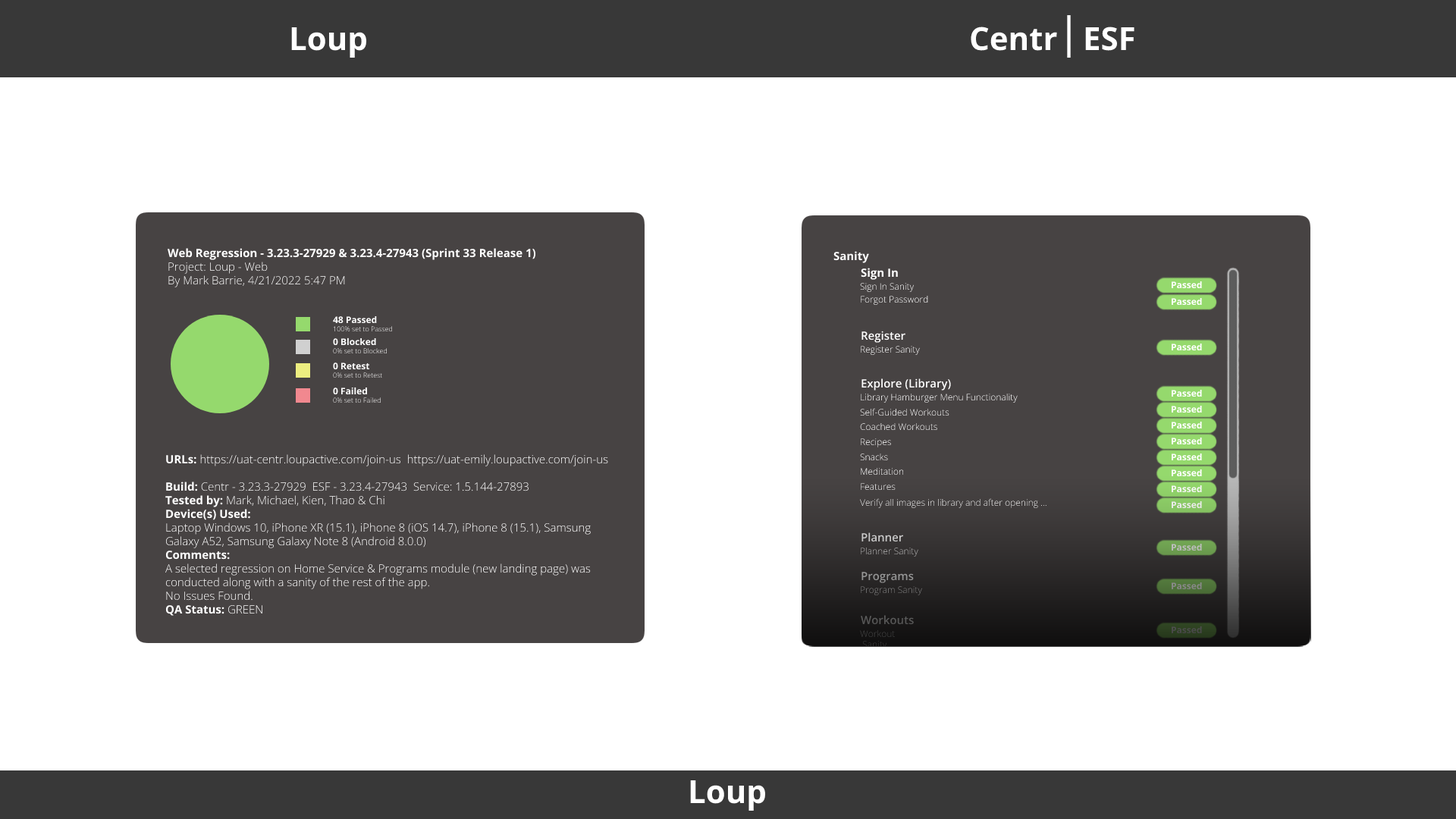
<style>
.page{position:relative;width:1456px;height:819px;background:#ffffff}
.page>*{position:absolute;margin:0}
.t1{font:31.8px "OpenSans-Bold";color:#ffffff}
.t2{font:11.4px "OpenSans-Bold";color:#ffffff}
.t3{font:11.4px "OpenSans-Light";color:#ffffff}
.t4{font:11.4px "OpenSans-SemiBold";color:#ffffff}
.t5{font:9.1px "OpenSans-Light"}
.t6{font:6.8px "OpenSans-Light";color:#ffffff}
.t7{font:9.1px "OpenSans-Bold";color:#ffffff}
.t8{font:9.1px "OpenSans-Light";color:#ffffff}
.t9{font:9.1px "OpenSans-Light";color:#e0e0e0}
.t10{font:11.4px "OpenSans-SemiBold";color:#c7c7c7}
.t11{font:9.1px "OpenSans-Light";color:#aeaeae}
.t12{font:11.4px "OpenSans-SemiBold";color:#959595}
.t13{font:11.4px "OpenSans-SemiBold";color:#575757}
</style>
<div class="page">
<p class="t1" style="left:291px;top:27px;width:76px;height:31px">Loup</p>
<p class="t1" style="left:971px;top:27px;width:86px;height:24px">Centr</p>
<p class="t1" style="left:1085px;top:27px;width:49px;height:24px">ESF</p>
<p class="t2" style="left:168px;top:248px;width:368px;height:39px">Web Regression - 3.23.3-27929 &amp; 3.23.4-27943 (Sprint 33 Release 1)<br><span class="t3">Project: Loup - Web<br>By Mark Barrie, 4/21/2022 5:47 PM</span></p>
<p class="t2" style="left:833px;top:251px;width:36px;height:12px">Sanity</p>
<p class="t4" style="left:861px;top:268px;width:37px;height:12px">Sign In</p>
<p class="t5" style="left:860px;top:283px;width:55px;height:9px">Sign In Sanity</p>
<p class="t5" style="left:861px;top:295px;width:67px;height:10px">Forgot Password</p>
<p class="t6" style="left:333px;top:315px;width:60px;height:17px"><span class="t7">48 Passed<br></span>100% set to Passed</p>
<p class="t6" style="left:333px;top:337px;width:54px;height:17px"><span class="t7">0 Blocked<br></span>0% set to Blocked</p>
<p class="t4" style="left:861px;top:331px;width:44px;height:12px">Register</p>
<p class="t8" style="left:861px;top:346px;width:59px;height:9px">Register Sanity</p>
<p class="t6" style="left:333px;top:362px;width:50px;height:16px"><span class="t7">0 Retest<br></span>0% set to Retest</p>
<p class="t6" style="left:333px;top:387px;width:48px;height:16px"><span class="t7">0 Failed<br></span>0% set to Failed</p>
<p class="t4" style="left:861px;top:378px;width:90px;height:13px">Explore (Library)</p>
<p class="t8" style="left:861px;top:393px;width:157px;height:10px">Library Hamburger Menu Functionality</p>
<p class="t8" style="left:860px;top:408px;width:89px;height:8px">Self-Guided Workouts</p>
<p class="t5" style="left:860px;top:422px;width:77px;height:9px">Coached Workouts</p>
<p class="t8" style="left:861px;top:438px;width:30px;height:9px">Recipes</p>
<p class="t3" style="left:165px;top:454px;width:443px;height:162px"><span class="t2">URLs:</span> https://uat-centr.loupactive.com/join-us  https://uat-emily.loupactive.com/join-us<br><br><span class="t2">Build: </span>Centr - 3.23.3-27929  ESF - 3.23.4-27943  Service: 1.5.144-27893<br><span class="t2">Tested by: </span>Mark, Michael, Kien, Thao &amp; Chi<br><span class="t2">Device(s) Used:</span><br>Laptop Windows 10, iPhone XR (15.1), iPhone 8 (iOS 14.7), iPhone 8 (15.1), Samsung <br>Galaxy A52, Samsung Galaxy Note 8 (Android 8.0.0)<br><span class="t2">Comments:</span><br>A selected regression on Home Service &amp; Programs module (new landing page) was<br>conducted along with a sanity of the rest of the app.<br>No Issues Found.<br><span class="t2">QA Status:</span> GREEN</p>
<p class="t5" style="left:860px;top:453px;width:28px;height:8px">Snacks</p>
<p class="t8" style="left:861px;top:467px;width:43px;height:8px">Meditation</p>
<p class="t5" style="left:861px;top:483px;width:35px;height:8px">Features</p>
<p class="t9" style="left:860px;top:498px;width:186px;height:10px">Verify all images in library and after opening ...</p>
<p class="t10" style="left:861px;top:532px;width:43px;height:10px">Planner</p>
<p class="t11" style="left:861px;top:547px;width:57px;height:10px">Planner Sanity</p>
<p class="t12" style="left:861px;top:572px;width:53px;height:11px">Programs</p>
<p class="t5" style="left:861px;top:586px;width:61px;height:9px">Program Sanity</p>
<p class="t13" style="left:861px;top:615px;width:53px;height:10px">Workouts</p>
<p class="t1" style="left:690px;top:780px;width:76px;height:31px">Loup</p>
</div>
